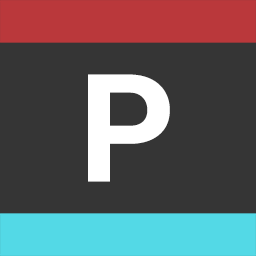
<style>
.page{position:relative;width:256px;height:256px;background:#353535}
.page>*{position:absolute;margin:0}
.t1{font:150px "Roboto-Bold";letter-spacing:0.1em;color:#ffffff;text-transform:uppercase}
</style>
<div class="page">
<p class="t1" style="left:88px;top:74px;width:82px;height:108px">P</p>
</div>
